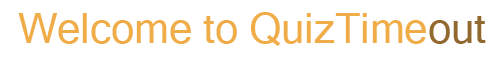
<style>
.page{position:relative;width:493px;height:61px;background:#ffffff}
.page>*{position:absolute;margin:0}
.t1{font:41.7px "MicrosoftSansSerif";color:#efac47}
.t2{font:41.7px "MicrosoftSansSerif";color:#91692e}
</style>
<div class="page">
<p class="t1" style="left:18px;top:12px;width:468px;height:34px">Welcome to QuizTime<span class="t2">out</span></p>
</div>
